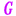
<style>
.page{position:relative;width:16px;height:16px;background:#ffffff}
.page>*{position:absolute;margin:0}
.t1{font:18.7px "FangSong_GB2312";color:#cc00ff;text-transform:uppercase;font-weight:bold;font-style:italic}
</style>
<div class="page">
<p class="t1" style="left:4px;top:1px;width:9px;height:14px">G</p>
</div>
